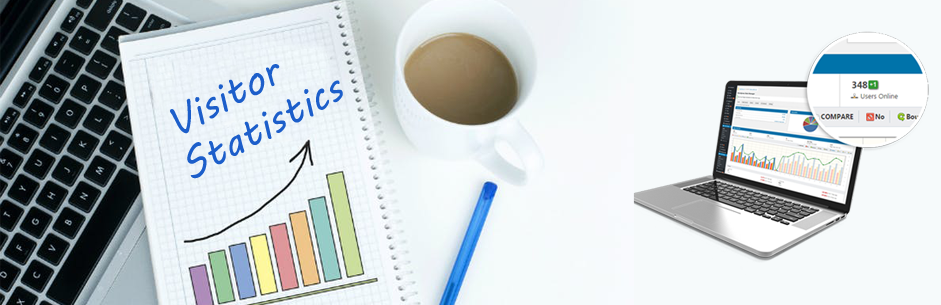
<style>
.page{position:relative;width:941px;height:305px;background:#f6fafb}
.page>*{position:absolute;margin:0}
.t1{font:40px "MVBoli";color:#1c5eca}
</style>
<div class="page">
<p class="t1" style="left:170px;top:64px;width:110px;height:70px;rotate:-28deg">Visitor</p>
<p class="t1" style="left:187px;top:80px;width:156px;height:99px;rotate:-28deg">Statistics</p>
</div>
